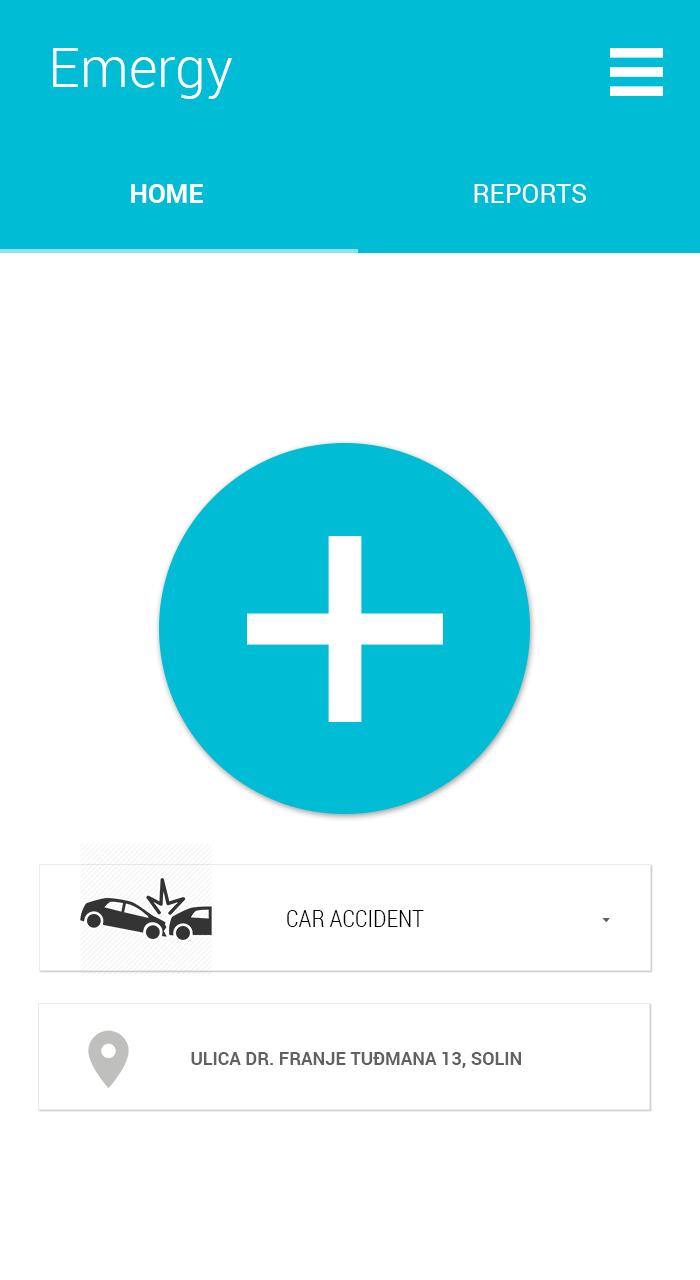
<style>
.page{position:relative;width:700px;height:1280px;background:#ffffff}
.page>*{position:absolute;margin:0}
.t1{font:55.2px "Roboto-Light";color:#fefefe}
.t2{font:26px "Roboto-Bold";color:#fefefe}
.t3{font:26px "Roboto-Regular";color:#fefefe}
.t4{font:24px "RobotoCondensed-Light";color:#000000}
.t5{font:18px "Roboto-Bold";color:#616161}
</style>
<div class="page">
<p class="t1" style="left:53px;top:48px;width:179px;height:51px">Emergy</p>
<p class="t2" style="left:131px;top:184px;width:72px;height:19px">HOME</p>
<p class="t3" style="left:474px;top:184px;width:112px;height:19px">REPORTS</p>
<p class="t4" style="left:287px;top:910px;width:137px;height:17px">CAR ACCIDENT</p>
<p class="t5" style="left:191px;top:1052px;width:330px;height:16px">ULICA DR. FRANJE TUĐMANA 13, SOLIN</p>
</div>
